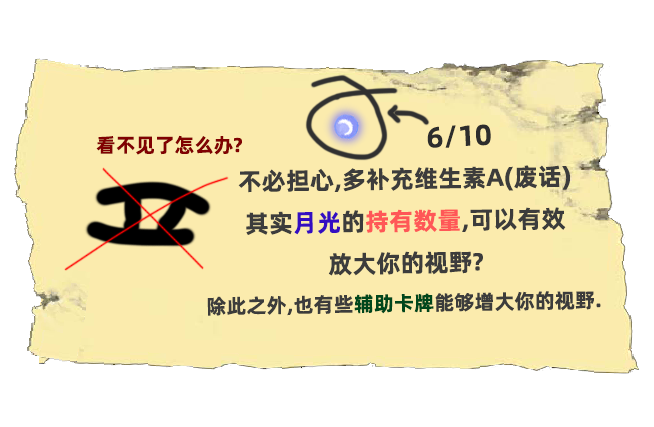
<style>
.page{position:relative;width:654px;height:427px;background:#fbebad}
.page>*{position:absolute;margin:0}
.t1{font:28.8px "AlibabaPuHuiTiB";color:#2d2d2d}
.t2{font:19.9px "AlibabaPuHuiTiB";color:#800101}
.t3{font:24.4px/42.1px "AlibabaPuHuiTiB";color:#3c3c3c}
.t4{font:24.4px/42.1px "AlibabaPuHuiTiB";color:#340ec1}
.t5{font:24.4px/42.1px "AlibabaPuHuiTiB";color:#ff5757}
.t6{font:20.4px/42.1px "AlibabaPuHuiTiB";color:#3c3c3c}
.t7{font:20.4px/42.1px "AlibabaPuHuiTiB";color:#00471c}
</style>
<div class="page">
<p class="t1" style="left:427px;top:124px;width:64px;height:24px;rotate:-3deg">6/10</p>
<p class="t2" style="left:96px;top:135px;width:146px;height:20px">看不见了怎么办?</p>
<p class="t3" style="left:207px;top:165px;width:394px;height:151px;text-align:center;rotate:-1deg">不必担心,多补充维生素A(废话)<br>其实<span class="t4">月光</span>的<span class="t5">持有数量</span>,可以有效<br>放大你的视野?<br><span class="t6">除此之外,也有些</span><span class="t7">辅助卡牌</span><span class="t6">能够增大你的视野.</span></p>
</div>
